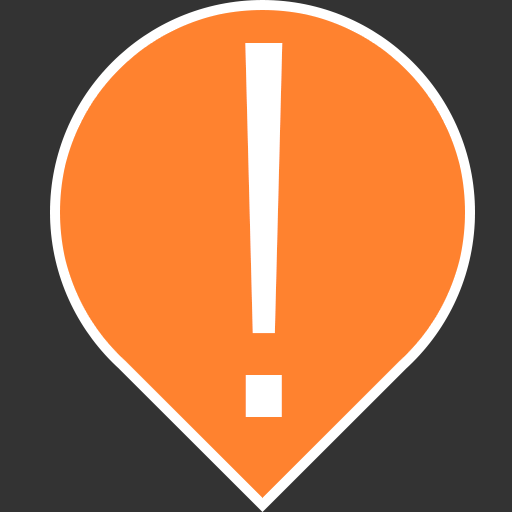
<style>
.page{position:relative;width:512px;height:512px;background:#ff822f}
.page>*{position:absolute;margin:0}
.t1{font:489.7px "AgencyFB-Reg";color:#ffffff}
</style>
<div class="page">
<p class="t1" style="left:245px;top:43px;width:38px;height:374px">!</p>
</div>
